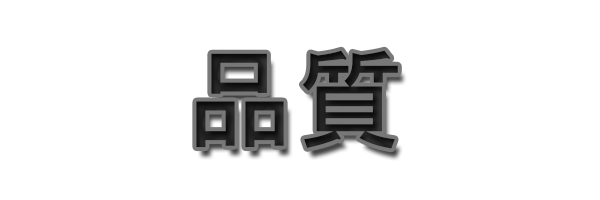
<style>
.page{position:relative;width:600px;height:200px;background:#ffffff}
.page>*{position:absolute;margin:0}
.t1{font:110px "MS-Gothic";color:#1a1a1a}
</style>
<div class="page">
<p class="t1" style="left:196px;top:50px;width:202px;height:99px">品質</p>
</div>
